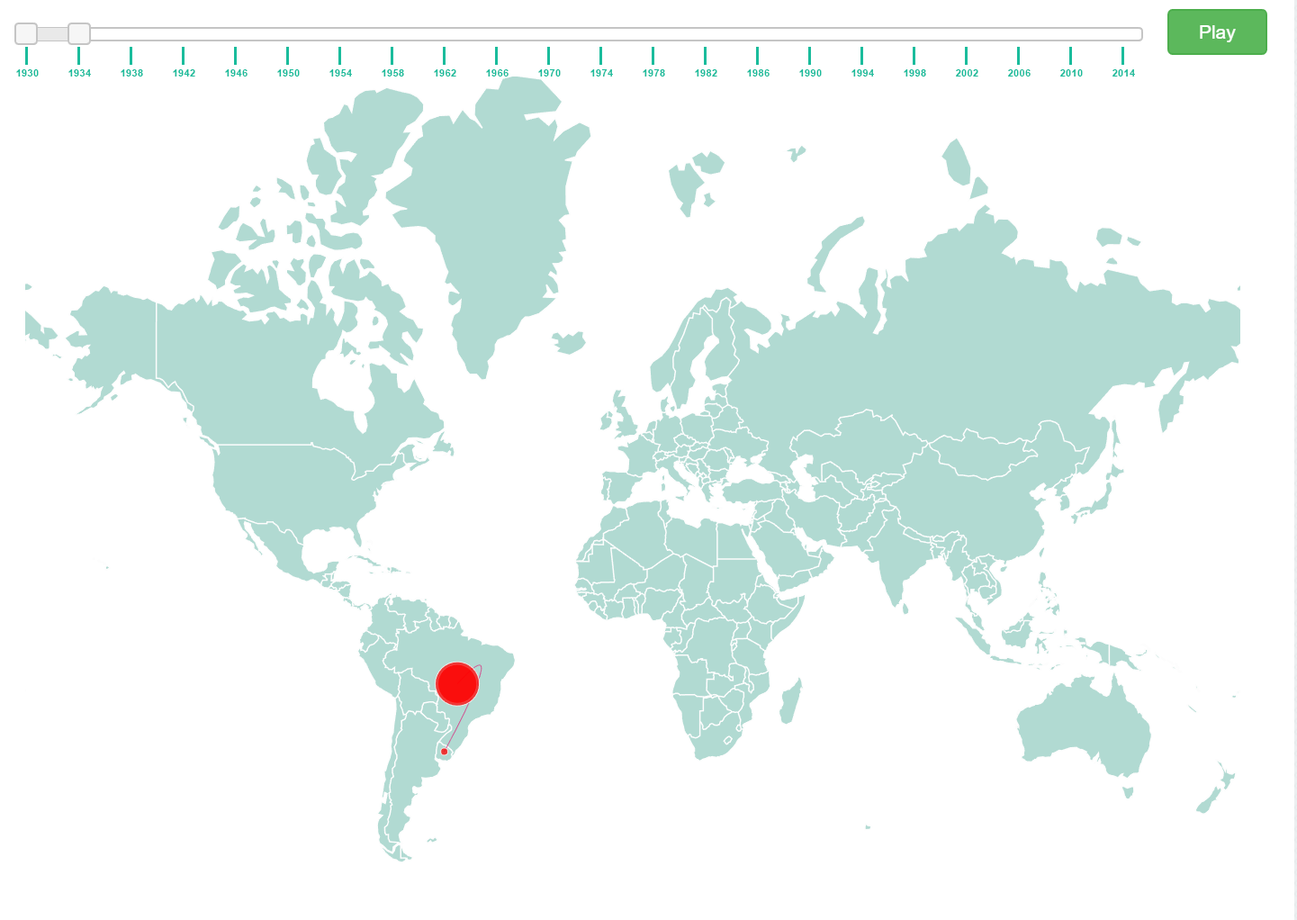
<style>
.page{position:relative;width:1297px;height:920px;background:#ffffff}
.page>*{position:absolute;margin:0}
.t1{font:10.3px "Arial-BoldMT";color:#1abc9c}
</style>
<div class="page">
<p class="t1" style="left:16px;top:69px;width:23px;height:7px">1930</p>
<p class="t1" style="left:68px;top:69px;width:23px;height:7px">1934</p>
<p class="t1" style="left:121px;top:69px;width:22px;height:7px">1938</p>
<p class="t1" style="left:173px;top:69px;width:22px;height:7px">1942</p>
<p class="t1" style="left:225px;top:69px;width:22px;height:7px">1946</p>
<p class="t1" style="left:277px;top:69px;width:23px;height:7px">1950</p>
<p class="t1" style="left:329px;top:69px;width:23px;height:7px">1954</p>
<p class="t1" style="left:382px;top:69px;width:22px;height:7px">1958</p>
<p class="t1" style="left:434px;top:69px;width:22px;height:7px">1962</p>
<p class="t1" style="left:486px;top:69px;width:22px;height:7px">1966</p>
<p class="t1" style="left:538px;top:69px;width:23px;height:7px">1970</p>
<p class="t1" style="left:590px;top:69px;width:23px;height:7px">1974</p>
<p class="t1" style="left:642px;top:69px;width:23px;height:7px">1978</p>
<p class="t1" style="left:695px;top:69px;width:22px;height:7px">1982</p>
<p class="t1" style="left:747px;top:69px;width:22px;height:7px">1986</p>
<p class="t1" style="left:799px;top:69px;width:23px;height:7px">1990</p>
<p class="t1" style="left:851px;top:69px;width:23px;height:7px">1994</p>
<p class="t1" style="left:903px;top:69px;width:23px;height:7px">1998</p>
<p class="t1" style="left:956px;top:69px;width:22px;height:7px">2002</p>
<p class="t1" style="left:1008px;top:69px;width:22px;height:7px">2006</p>
<p class="t1" style="left:1060px;top:69px;width:22px;height:7px">2010</p>
<p class="t1" style="left:1112px;top:69px;width:23px;height:7px">2014</p>
</div>
